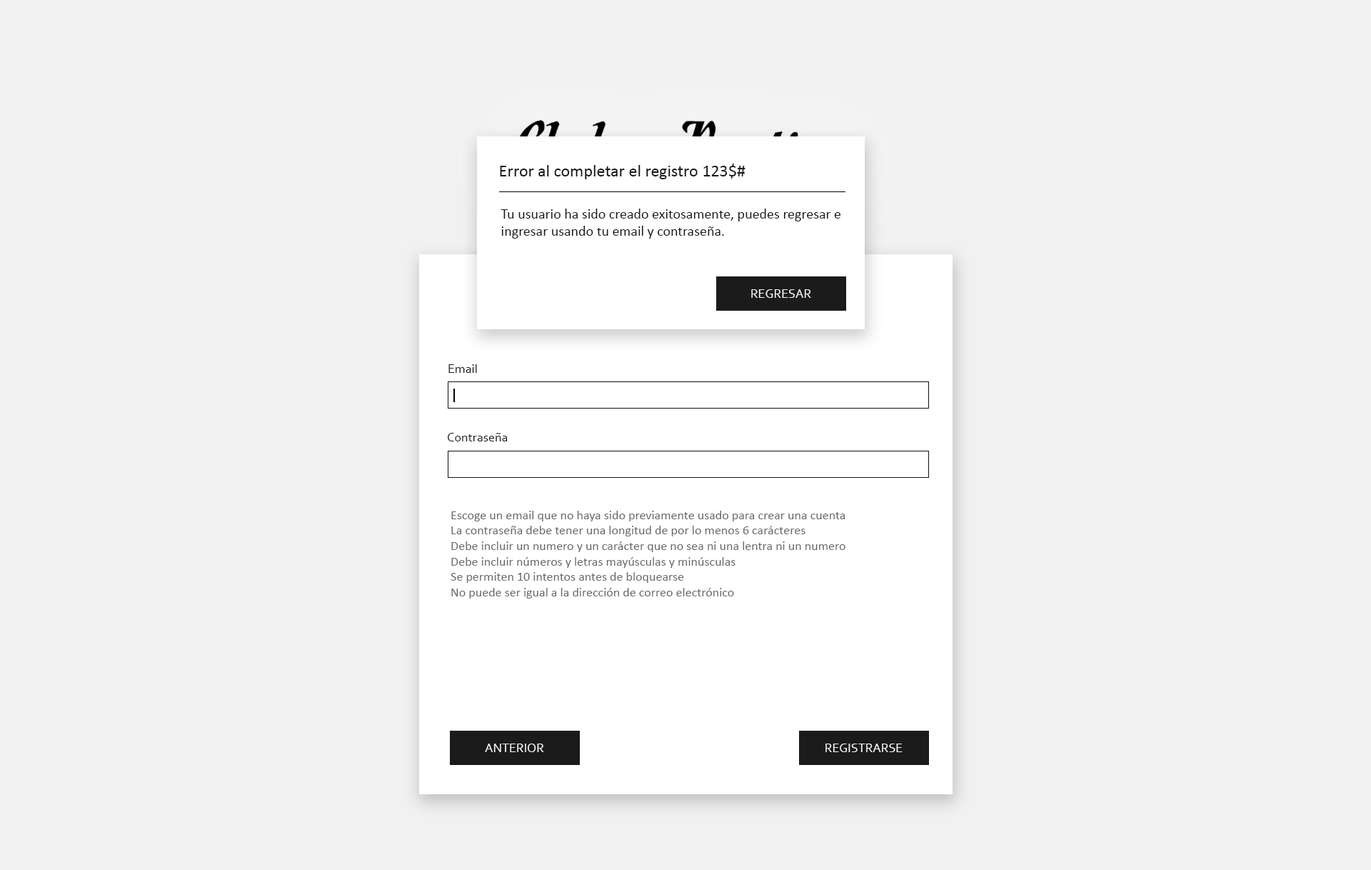
<style>
.page{position:relative;width:1371px;height:870px;background:#f1f1f1}
.page>*{position:absolute;margin:0}
.t1{font:17.1px "Calibri";color:#1b1b1b}
.t2{font:14.3px "Calibri";color:#1b1b1b}
.t3{font:12.9px "Corbel";color:#f4f4f4}
.t4{font:12.9px "Corbel";color:#1b1b1b}
.t5{font:12.9px "Calibri";color:#6a6a6a}
</style>
<div class="page">
<p class="t1" style="left:500px;top:164px;width:245px;height:15px">Error al completar el registro 123$#</p>
<p class="t2" style="left:501px;top:209px;width:339px;height:30px">Tu usuario ha sido creado exitosamente, puedes regresar e <br>ingresar usando tu email y contraseña.</p>
<p class="t3" style="left:751px;top:289px;width:60px;height:9px">REGRESAR</p>
<p class="t4" style="left:448px;top:364px;width:29px;height:9px">Email</p>
<p class="t4" style="left:448px;top:433px;width:60px;height:8px">Contraseña</p>
<p class="t5" style="left:451px;top:511px;width:394px;height:87px">Escoge un email que no haya sido previamente usado para crear una cuenta <br>La contraseña debe tener una longitud de por lo menos 6 carácteres<br>Debe incluir un numero y un carácter que no sea ni una lentra ni un numero<br>Debe incluir números y letras mayúsculas y minúsculas<br>Se permiten 10 intentos antes de bloquearse<br>No puede ser igual a la dirección de correo electrónico</p>
<p class="t3" style="left:485px;top:743px;width:59px;height:9px">ANTERIOR</p>
<p class="t3" style="left:825px;top:743px;width:78px;height:9px">REGISTRARSE</p>
</div>
